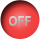
<style>
.page{position:relative;width:40px;height:40px;background:#ffffff}
.page>*{position:absolute;margin:0}
.t1{font:14.2px "ArialNarrow-Bold";color:#c3bdbd}
</style>
<div class="page">
<p class="t1" style="left:8px;top:16px;width:24px;height:10px">OFF</p>
</div>
